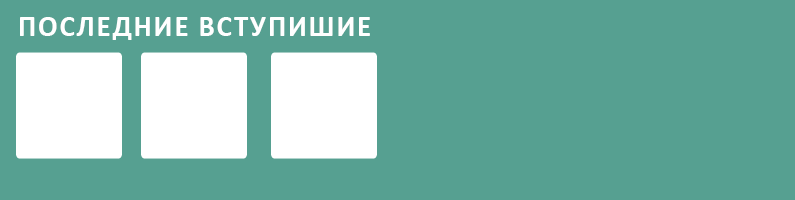
<style>
.page{position:relative;width:795px;height:200px;background:#56a091}
.page>*{position:absolute;margin:0}
.t1{font:28.5px "Calibri-Bold";letter-spacing:0.06em;color:#ffffff}
</style>
<div class="page">
<p class="t1" style="left:20px;top:17px;width:350px;height:23px">ПОСЛЕДНИЕ ВСТУПИШИЕ</p>
</div>
